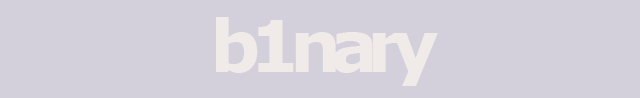
<style>
.page{position:relative;width:640px;height:98px;background:#d4d0db}
.page>*{position:absolute;margin:0}
.t1{font:72px "Verdana-Bold";letter-spacing:-0.15em;color:#f0ebe8}
</style>
<div class="page">
<p class="t1" style="left:216px;top:17px;width:222px;height:69px">b1nary</p>
</div>
